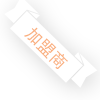
<style>
.page{position:relative;width:100px;height:100px;background:#ffffff}
.page>*{position:absolute;margin:0}
.t1{font:17px "SimHei";color:#fab07f}
</style>
<div class="page">
<p class="t1" style="left:24px;top:27px;width:44px;height:42px;rotate:45deg">加盟商</p>
</div>
